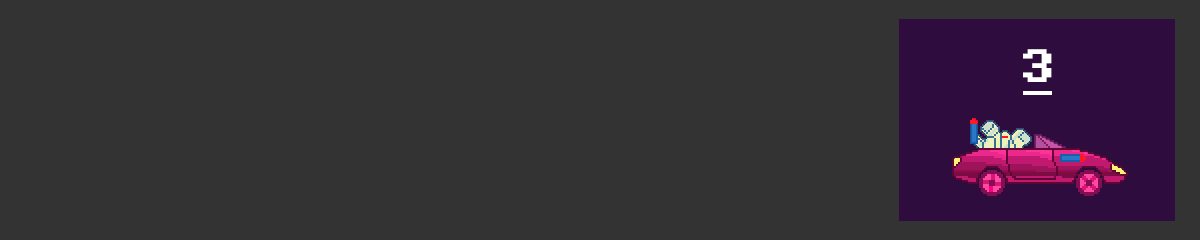
<style>
.page{position:relative;width:1200px;height:240px;background:#333333}
.page>*{position:absolute;margin:0}
.t1{font:48px "PixelDigivolve";color:#feffff;text-transform:uppercase}
</style>
<div class="page">
<p class="t1" style="left:1023px;top:49px;width:29px;height:33px">3</p>
</div>
